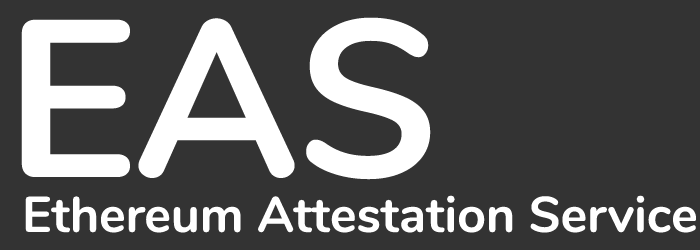
<style>
.page{position:relative;width:700px;height:250px;background:#333333}
.page>*{position:absolute;margin:0}
.t1{font:223px "Nunito-Bold";color:#ffffff}
.t2{font:50px "Nunito-Bold";color:#ffffff}
</style>
<div class="page">
<p class="t1" style="left:21px;top:17px;width:410px;height:163px">EAS</p>
<p class="t2" style="left:25px;top:195px;width:671px;height:38px">Ethereum Attestation Service</p>
</div>
